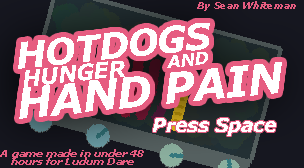
<style>
.page{position:relative;width:304px;height:168px;background:#e65c80}
.page>*{position:absolute;margin:0}
.t1{font:9.9px "Verdana-BoldItalic";letter-spacing:-0.03em;color:#e65c80}
.t2{font:36px "Verdana-BoldItalic";letter-spacing:-0.03em;color:#ffffff}
.t3{font:16.7px "Verdana-BoldItalic";letter-spacing:-0.03em;color:#ffffff}
.t4{font:41.8px "Verdana-BoldItalic";letter-spacing:-0.03em;color:#ffffff}
.t5{font:22.3px "Verdana-BoldItalic";letter-spacing:-0.03em;color:#ffffff}
.t6{font:19.2px "Verdana-BoldItalic";letter-spacing:-0.03em;color:#ffffff}
.t7{font:10.4px/7.4px "Verdana-BoldItalic";letter-spacing:-0.03em;color:#e65c80}
</style>
<div class="page">
<p class="t1" style="left:197px;top:1px;width:99px;height:10px">By Sean Whiteman</p>
<p class="t2" style="left:18px;top:23px;width:192px;height:46px;rotate:-6deg">HOTDOGS</p>
<p class="t3" style="left:167px;top:52px;width:41px;height:16px;rotate:-6deg">AND</p>
<p class="t4" style="left:19px;top:62px;width:263px;height:57px;rotate:-6deg">HAND PAIN</p>
<p class="t5" style="left:24px;top:61px;width:101px;height:26px;rotate:-6deg">HUNGER</p>
<p class="t6" style="left:153px;top:118px;width:123px;height:18px">Press Space</p>
<p class="t7" style="left:0px;top:149px;width:144px;height:16px;text-align:center">A game made in under 48<br>hours for Ludum Dare</p>
</div>
